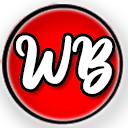
<style>
.page{position:relative;width:128px;height:128px}
.page>*{position:absolute;margin:0}
.t1{font:55.6px "HelloSunshinePersonalUse";color:#ffffff}
</style>
<div class="page">
<p class="t1" style="left:16px;top:35px;width:97px;height:59px">WB</p>
</div>
